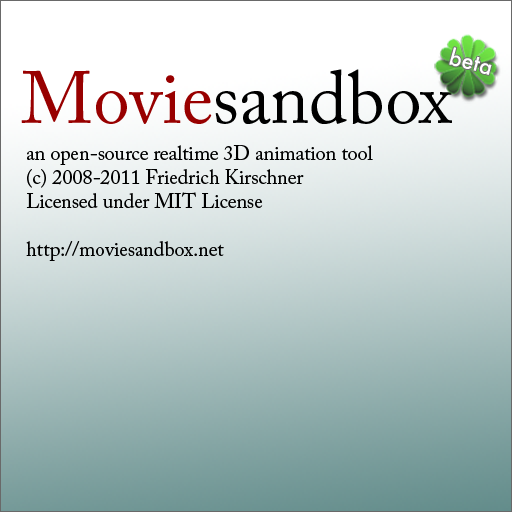
<style>
.page{position:relative;width:512px;height:512px}
.page>*{position:absolute;margin:0}
.t1{font:21.8px "Futura-Medium";color:#ffffff}
.t2{font:73.4px "ACaslonPro-Regular";color:#000000}
.t3{font:73.4px "ACaslonPro-Regular";color:#980000}
.t4{font:20px "ACaslonPro-Regular";color:#000000}
</style>
<div class="page">
<p class="t1" style="left:449px;top:47px;width:43px;height:28px;rotate:15deg">beta</p>
<p class="t2" style="left:21px;top:69px;width:431px;height:55px"><span class="t3">Movie</span>sandbox</p>
<p class="t4" style="left:26px;top:145px;width:347px;height:116px">an open-source realtime 3D animation tool <br>(c) 2008-2011 Friedrich Kirschner<br>Licensed under MIT License<br><br>http://moviesandbox.net</p>
</div>
